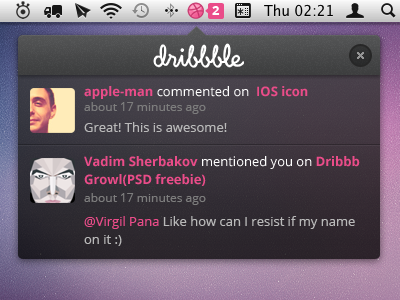
<style>
.page{position:relative;width:400px;height:300px}
.page>*{position:absolute;margin:0}
.t1{font:13px "OpenSans-Bold";color:#ffffff}
.t2{font:13px "OpenSans";color:#ffffff}
.t3{font:13px "OpenSans-Bold";color:#ea4c89}
.t4{font:12px "OpenSans";color:#7d7d7d}
.t5{font:13px "OpenSans";color:#b9b9b9}
.t6{font:13px/18px "OpenSans-Bold";color:#ea4c89}
.t7{font:13px/18px "OpenSans";color:#ffffff}
.t8{font:13px/18px "OpenSans";color:#b9b9b9}
.t9{font:13px/18px "OpenSans";color:#ea4c89}
</style>
<div class="page">
<p class="t1" style="left:212px;top:6px;width:8px;height:9px">2</p>
<p class="t2" style="left:84px;top:86px;width:224px;height:13px"><span class="t3">apple-man </span>commented on <span class="t3"> IOS icon</span></p>
<p class="t4" style="left:84px;top:102px;width:122px;height:12px">about 17 minutes ago</p>
<p class="t5" style="left:84px;top:122px;width:143px;height:10px">Great! This is awesome!</p>
<p class="t6" style="left:84px;top:156px;width:276px;height:30px">Vadim Sherbakov <span class="t7">mentioned you on</span> Dribbb <br>Growl(PSD freebie)</p>
<p class="t4" style="left:84px;top:193px;width:122px;height:12px">about 17 minutes ago</p>
<p class="t8" style="left:84px;top:216px;width:271px;height:30px"><span class="t9">@Virgil Pana</span> Like how can I resist if my name <br>on it :)</p>
</div>
